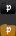
<style>
.page{position:relative;width:16px;height:36px;background:#333333}
.page>*{position:absolute;margin:0}
.t1{font:9px "LucidaBlackletter";color:#ffffff}
</style>
<div class="page">
<p class="t1" style="left:6px;top:5px;width:5px;height:7px">p</p>
<p class="t1" style="left:6px;top:27px;width:5px;height:7px">p</p>
</div>
